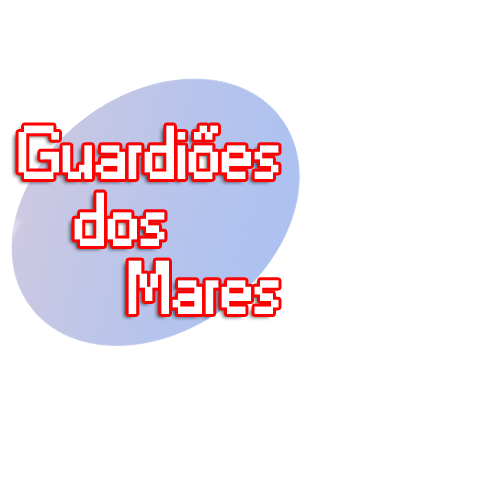
<style>
.page{position:relative;width:490px;height:490px;background:#ffffff}
.page>*{position:absolute;margin:0}
.t1{font:70px "Small Fonts";color:#fffcfc;font-weight:bold}
.t2{font:70px "Small Fonts";color:#ffffff;font-weight:bold}
</style>
<div class="page">
<p class="t1" style="left:18px;top:125px;width:261px;height:54px">Guardiões</p>
<p class="t2" style="left:74px;top:192px;width:91px;height:54px">dos</p>
<p class="t2" style="left:128px;top:260px;width:151px;height:54px">Mares</p>
</div>
